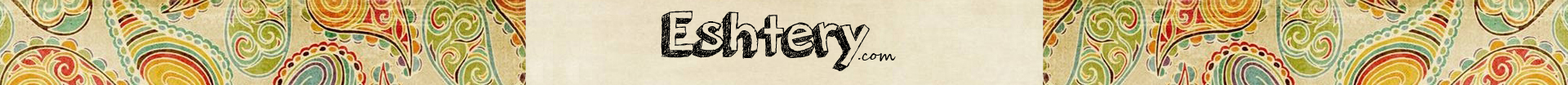
<style>
.page{position:relative;width:1568px;height:85px}
.page>*{position:absolute;margin:0}
.t1{font:65.3px "orangejuice";color:#000000}
.t2{font:15.2px "SegoeScript";color:#000000}
</style>
<div class="page">
<p class="t1" style="left:661px;top:11px;width:209px;height:61px">Eshtery</p>
<p class="t2" style="left:858px;top:53px;width:38px;height:8px">com.</p>
</div>
